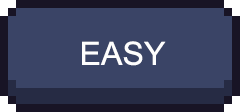
<style>
.page{position:relative;width:240px;height:112px;background:#3a4466}
.page>*{position:absolute;margin:0}
.t1{font:32px "ArialMT";letter-spacing:0.005em;color:#fefefe}
</style>
<div class="page">
<p class="t1" style="left:82px;top:41px;width:84px;height:25px">EASY</p>
</div>
